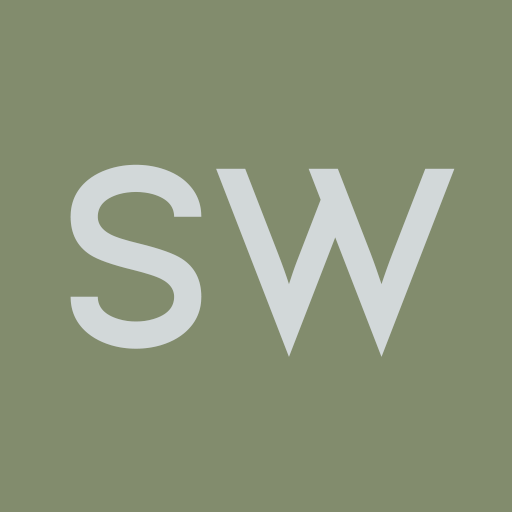
<style>
.page{position:relative;width:512px;height:512px;background:#828c6d}
.page>*{position:absolute;margin:0}
.t1{font:250px "MayekaDemiBoldDemo";color:#d2d8d9}
</style>
<div class="page">
<p class="t1" style="left:70px;top:164px;width:385px;height:193px">SW</p>
</div>
